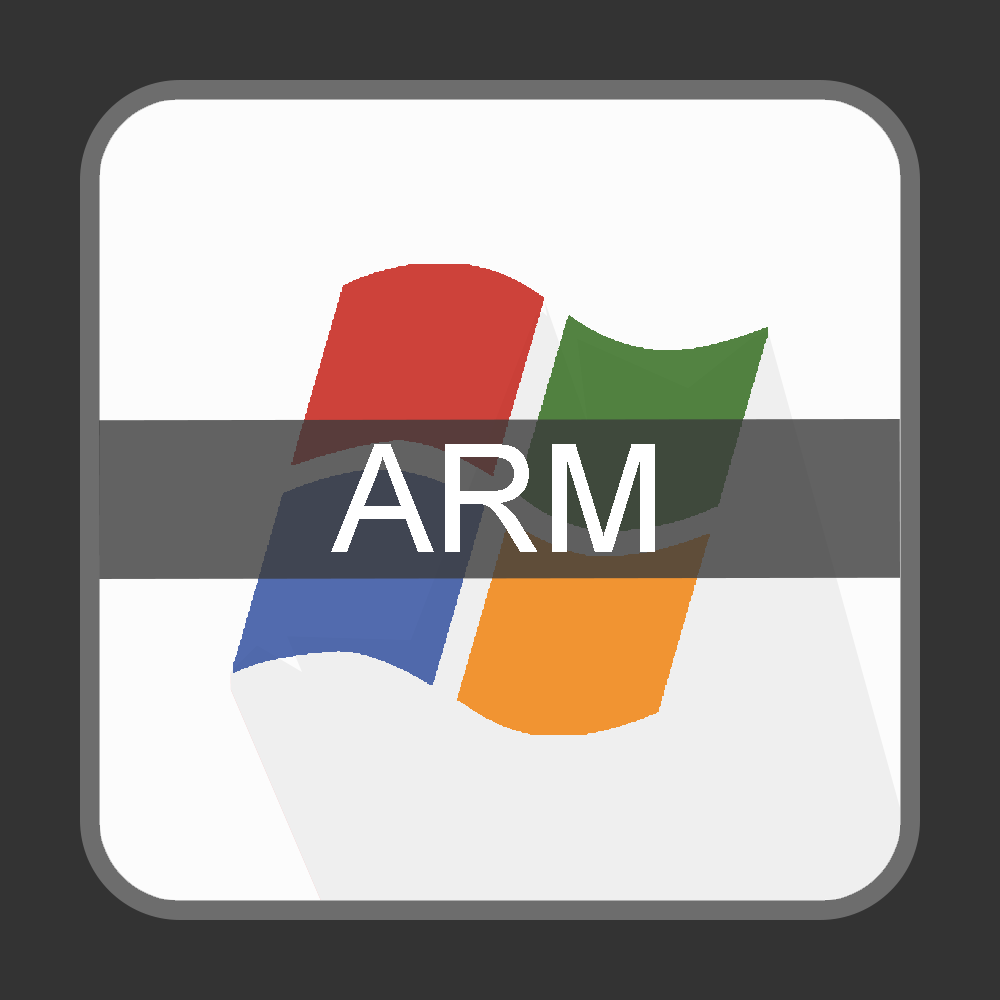
<style>
.page{position:relative;width:1000px;height:1000px;background:#333333}
.page>*{position:absolute;margin:0}
.t1{font:150px "ArialMT";color:#ffffff}
</style>
<div class="page">
<p class="t1" style="left:331px;top:444px;width:324px;height:108px">ARM</p>
</div>
